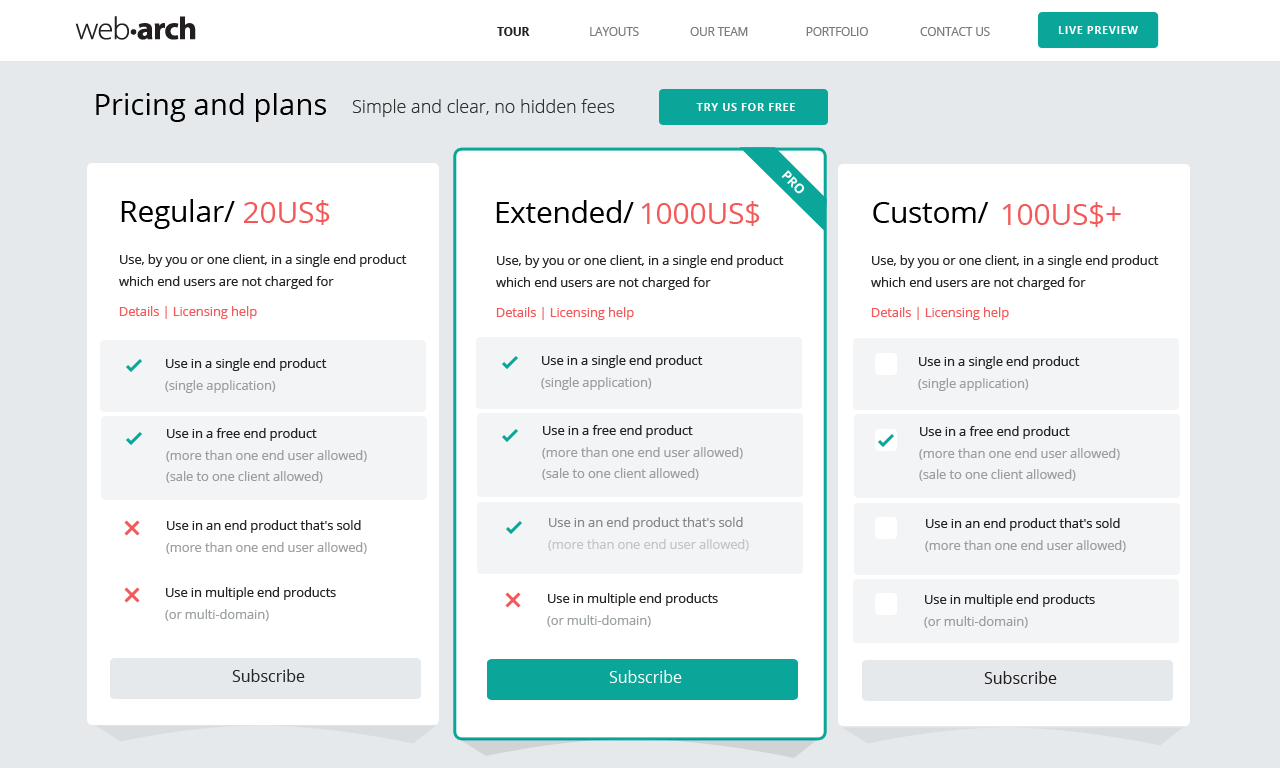
<style>
.page{position:relative;width:1280px;height:768px;background:#ffffff}
.page>*{position:absolute;margin:0}
.t1{font:11.5px "OpenSans-Bold";color:#231f20}
.t2{font:11.5px "OpenSans";color:#7b7979}
.t3{font:11px "OpenSans-Bold";letter-spacing:0.05em;color:#ffffff}
.t4{font:29.3px "OpenSans";color:#000000}
.t5{font:18px "OpenSans-Light";color:#2e2f2f}
.t6{font:13px "OpenSans-Bold";letter-spacing:-0.01em;color:#ffffff}
.t7{font:30px "OpenSans";letter-spacing:-0.01em;color:#000000}
.t8{font:30px "OpenSans";letter-spacing:-0.01em;color:#f35958}
.t9{font:13px/21.6px "OpenSans";letter-spacing:-0.01em;color:#262626}
.t10{font:13px "OpenSans";letter-spacing:-0.01em;color:#f35958}
.t11{font:13px/21.6px "OpenSans";letter-spacing:-0.01em}
.t12{font:13px/21.6px "OpenSans";letter-spacing:-0.01em;color:#8a8f93}
.t13{font:13px/21.6px "OpenSans";letter-spacing:-0.01em;color:#000000}
.t14{font:16px "OpenSans";color:#242627}
.t15{font:16px "OpenSans";color:#ffffff}
.t16{font:16px "OpenSans";color:#231f20}
</style>
<div class="page">
<p class="t1" style="left:497px;top:27px;width:33px;height:9px">TOUR</p>
<p class="t2" style="left:590px;top:27px;width:49px;height:9px">LAYOUTS</p>
<p class="t2" style="left:690px;top:27px;width:58px;height:9px">OUR TEAM</p>
<p class="t2" style="left:806px;top:27px;width:62px;height:9px">PORTFOLIO</p>
<p class="t2" style="left:920px;top:27px;width:70px;height:9px">CONTACT US</p>
<p class="t3" style="left:1058px;top:26px;width:80px;height:8px">LIVE PREVIEW</p>
<p class="t4" style="left:96px;top:93px;width:230px;height:29px">Pricing and plans</p>
<p class="t5" style="left:352px;top:99px;width:263px;height:18px">Simple and clear, no hidden fees</p>
<p class="t3" style="left:696px;top:103px;width:99px;height:8px">TRY US FOR FREE</p>
<p class="t6" style="left:781px;top:170px;width:24px;height:24px;rotate:45deg">PRO</p>
<p class="t7" style="left:121px;top:199px;width:114px;height:30px">Regular/</p>
<p class="t8" style="left:244px;top:200px;width:86px;height:25px">20US$</p>
<p class="t7" style="left:496px;top:200px;width:138px;height:23px">Extended/</p>
<p class="t8" style="left:641px;top:201px;width:119px;height:25px">1000US$</p>
<p class="t7" style="left:873px;top:202px;width:116px;height:21px">Custom/</p>
<p class="t8" style="left:1002px;top:202px;width:119px;height:25px">100US$+</p>
<p class="t9" style="left:119px;top:254px;width:288px;height:35px">Use, by you or one client, in a single end product which end users are not charged for</p>
<p class="t9" style="left:496px;top:255px;width:288px;height:35px">Use, by you or one client, in a single end product which end users are not charged for</p>
<p class="t9" style="left:871px;top:255px;width:288px;height:35px">Use, by you or one client, in a single end product which end users are not charged for</p>
<p class="t10" style="left:119px;top:306px;width:138px;height:13px">Details | Licensing help</p>
<p class="t10" style="left:496px;top:307px;width:138px;height:13px">Details | Licensing help</p>
<p class="t10" style="left:871px;top:307px;width:138px;height:13px">Details | Licensing help</p>
<p class="t11" style="left:165px;top:358px;width:162px;height:35px">Use in a single end product <br>(single application)</p>
<p class="t11" style="left:541px;top:355px;width:162px;height:35px">Use in a single end product <br>(single application)</p>
<p class="t11" style="left:918px;top:356px;width:162px;height:35px">Use in a single end product <br>(single application)</p>
<p class="t12" style="left:542px;top:425px;width:201px;height:55px;opacity:0.85"><span class="t13">Use in a free end product <br></span>(more than one end user allowed) <br>(sale to one client allowed)</p>
<p class="t12" style="left:166px;top:428px;width:201px;height:55px;opacity:0.85"><span class="t13">Use in a free end product <br></span>(more than one end user allowed) <br>(sale to one client allowed)</p>
<p class="t12" style="left:919px;top:426px;width:201px;height:55px;opacity:0.85"><span class="t13">Use in a free end product <br></span>(more than one end user allowed) <br>(sale to one client allowed)</p>
<p class="t11" style="left:166px;top:520px;width:201px;height:34px">Use in an end product that's sold <br>(more than one end user allowed)</p>
<p class="t11" style="left:548px;top:517px;width:201px;height:34px">Use in an end product that's sold <br>(more than one end user allowed)</p>
<p class="t11" style="left:925px;top:518px;width:201px;height:34px">Use in an end product that's sold <br>(more than one end user allowed)</p>
<p class="t11" style="left:165px;top:587px;width:171px;height:34px">Use in multiple end products <br>(or multi-domain)</p>
<p class="t11" style="left:547px;top:593px;width:171px;height:34px">Use in multiple end products <br>(or multi-domain)</p>
<p class="t11" style="left:924px;top:594px;width:171px;height:34px">Use in multiple end products <br>(or multi-domain)</p>
<p class="t14" style="left:232px;top:669px;width:73px;height:13px">Subscribe</p>
<p class="t15" style="left:609px;top:670px;width:73px;height:13px">Subscribe</p>
<p class="t16" style="left:984px;top:671px;width:73px;height:13px">Subscribe</p>
</div>
